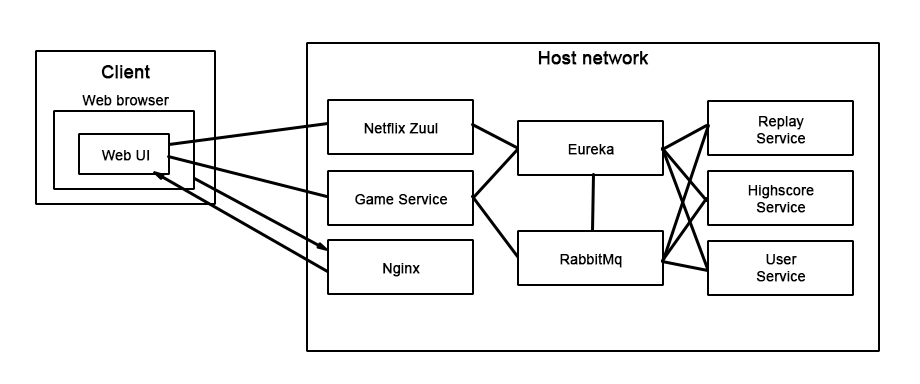
<style>
.page{position:relative;width:920px;height:384px;background:#ffffff}
.page>*{position:absolute;margin:0}
.t1{font:18px "ArialMT";color:#000000;font-weight:bold}
.t2{font:14px "ArialMT";color:#000000;font-weight:bold}
</style>
<div class="page">
<p class="t1" style="left:538px;top:51px;width:111px;height:14px">Host network</p>
<p class="t1" style="left:101px;top:65px;width:49px;height:14px">Client</p>
<p class="t2" style="left:82px;top:95px;width:87px;height:11px">Web browser</p>
<p class="t2" style="left:364px;top:122px;width:74px;height:12px">Netflix Zuul</p>
<p class="t2" style="left:756px;top:116px;width:50px;height:28px;text-align:center">Replay<br>Service</p>
<p class="t2" style="left:101px;top:150px;width:49px;height:11px">Web UI</p>
<p class="t2" style="left:568px;top:144px;width:46px;height:11px">Eureka</p>
<p class="t2" style="left:748px;top:185px;width:66px;height:28px;text-align:center">Highscore<br>Service</p>
<p class="t2" style="left:355px;top:194px;width:93px;height:11px">Game Service</p>
<p class="t2" style="left:560px;top:253px;width:62px;height:15px">RabbitMq</p>
<p class="t2" style="left:756px;top:254px;width:50px;height:28px;text-align:center">User<br>Service</p>
<p class="t2" style="left:383px;top:263px;width:37px;height:14px">Nginx</p>
</div>
